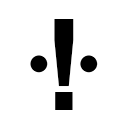
<style>
.page{position:relative;width:128px;height:128px;background:#ffffff}
.page>*{position:absolute;margin:0}
.t1{font:127.4px "Arial-BoldMT";color:#000000}
</style>
<div class="page">
<p class="t1" style="left:54px;top:19px;width:20px;height:91px">!</p>
</div>
